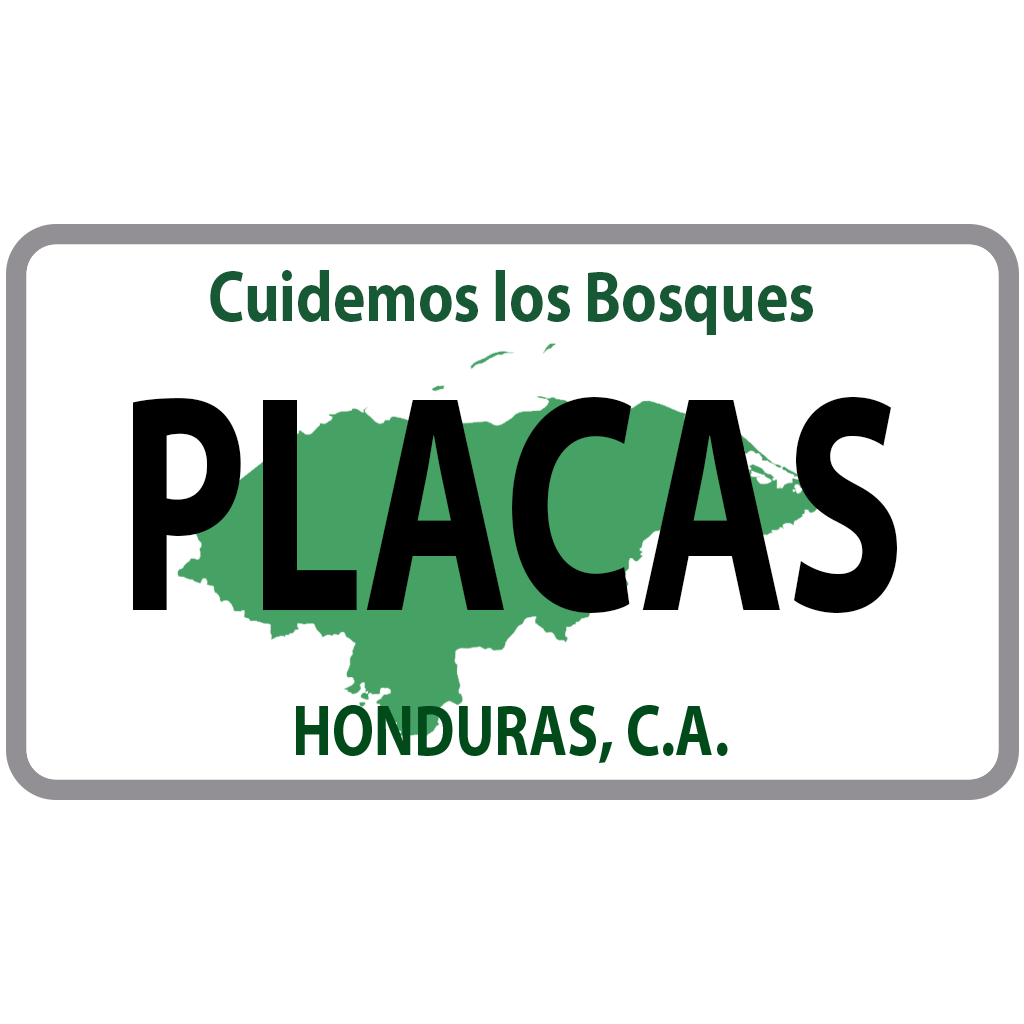
<style>
.page{position:relative;width:1024px;height:1024px;background:#ffffff}
.page>*{position:absolute;margin:0}
.t1{font:72px "MyriadPro-Bold";color:#175935;scale:0.85 1}
.t2{font:311.9px "MyriadPro-Bold";color:#000000;scale:0.71 1}
</style>
<div class="page">
<p class="t1" style="left:210px;top:270px;width:603px;height:65px">Cuidemos los Bosques</p>
<p class="t2" style="left:133px;top:397px;width:764px;height:216px">PLACAS</p>
</div>
